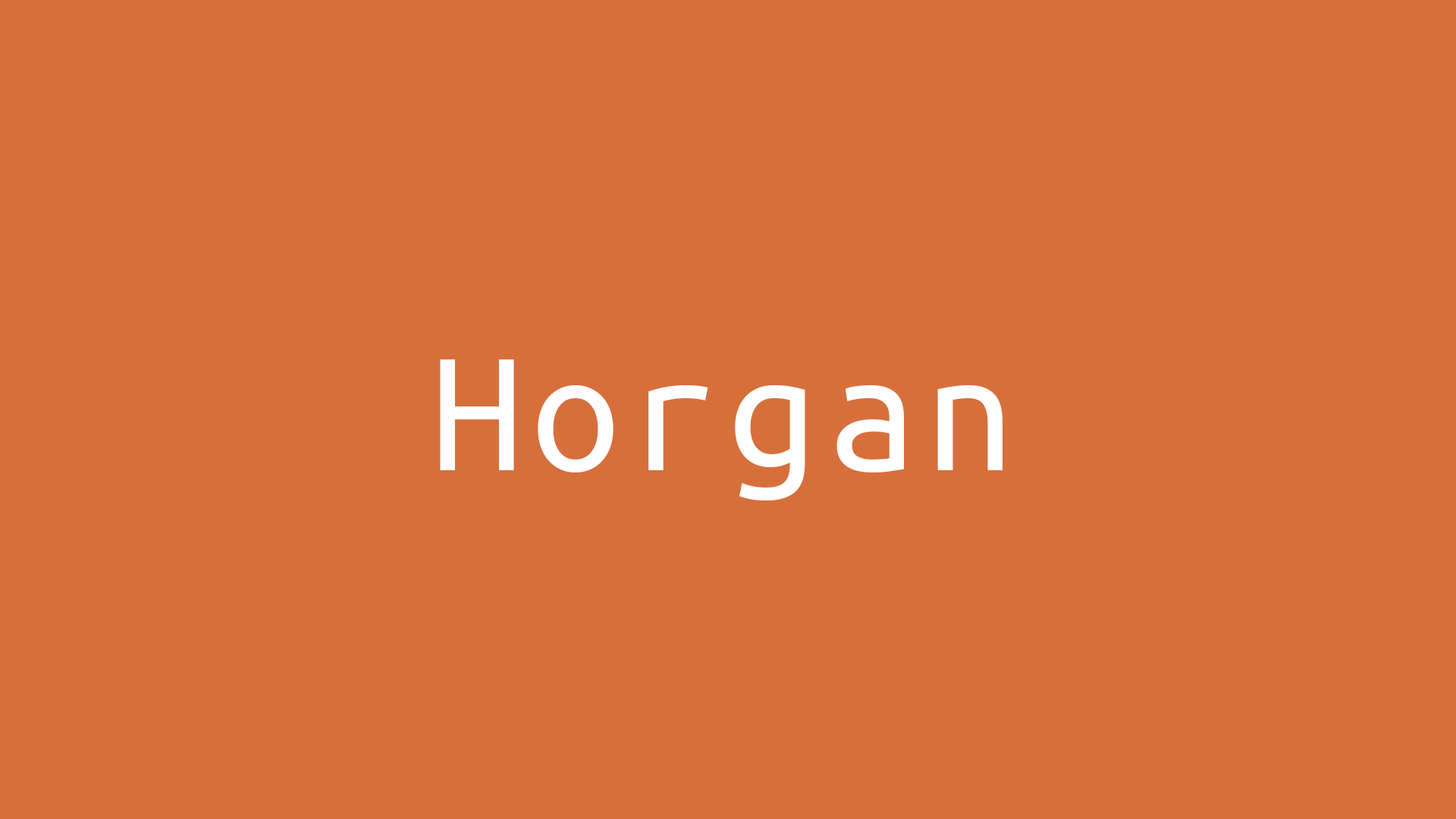
<style>
.page{position:relative;width:1456px;height:819px;background:#d76f3b}
.page>*{position:absolute;margin:0}
.t1{font:179.2px "UbuntuMono-Regular";letter-spacing:0.05em;color:#ffffff}
</style>
<div class="page">
<p class="t1" style="left:440px;top:359px;width:563px;height:141px">Horgan</p>
</div>
